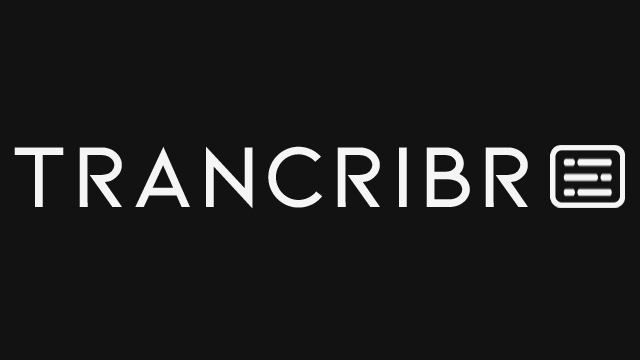
<style>
.page{position:relative;width:640px;height:360px;background:#121212}
.page>*{position:absolute;margin:0}
.t1{font:91.6px "Kiona-SemiBold";letter-spacing:0.04em;color:#f5f5f5}
</style>
<div class="page">
<p class="t1" style="left:14px;top:146px;width:514px;height:63px">Trancribr</p>
</div>
